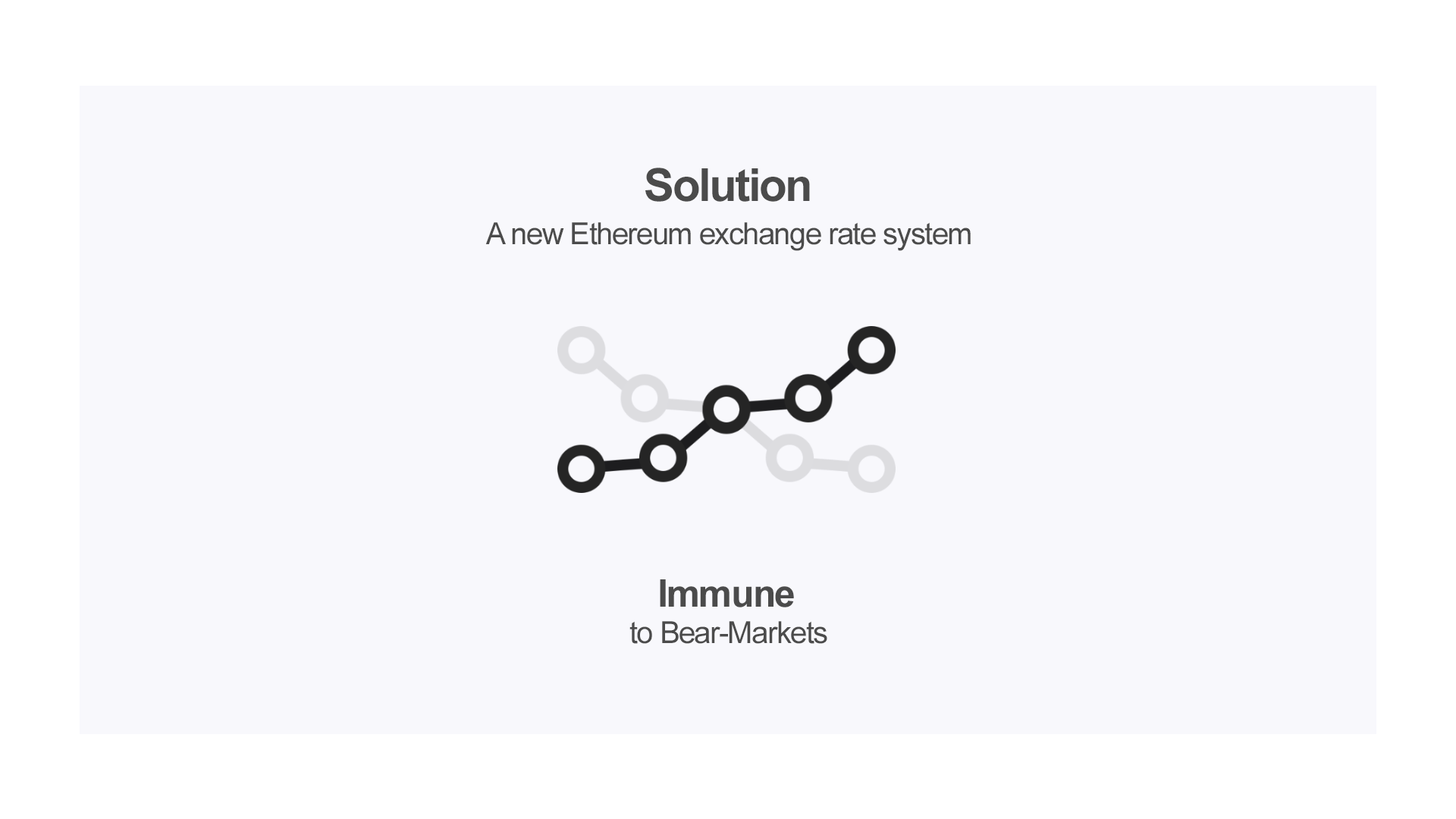
<style>
.page{position:relative;width:1456px;height:819px;background:#f8f8fc}
.page>*{position:absolute;margin:0}
.t1{font:45.5px "Arial-BoldMT";letter-spacing:-0.04em;color:#4b4b4b}
.t2{font:30.3px "ArialMT";letter-spacing:-0.04em;color:#4b4b4b}
.t3{font:38.1px "Arial-BoldMT";letter-spacing:-0.04em;color:#4b4b4b}
</style>
<div class="page">
<p class="t1" style="left:645px;top:168px;width:165px;height:34px">Solution</p>
<p class="t2" style="left:485px;top:222px;width:486px;height:29px">A new Ethereum exchange rate system</p>
<p class="t3" style="left:660px;top:579px;width:134px;height:28px">Immune</p>
<p class="t2" style="left:629px;top:621px;width:198px;height:23px">to Bear-Markets</p>
</div>
